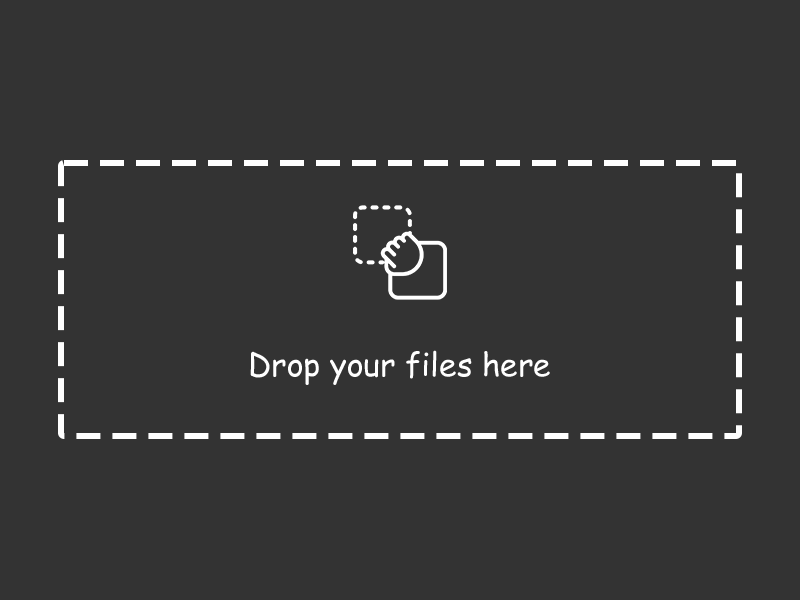
<style>
.page{position:relative;width:800px;height:600px;background:#333333}
.page>*{position:absolute;margin:0}
.t1{font:32px "ComicSansMS";color:#ffffff}
</style>
<div class="page">
<p class="t1" style="left:250px;top:350px;width:300px;height:35px">Drop your files here</p>
</div>
